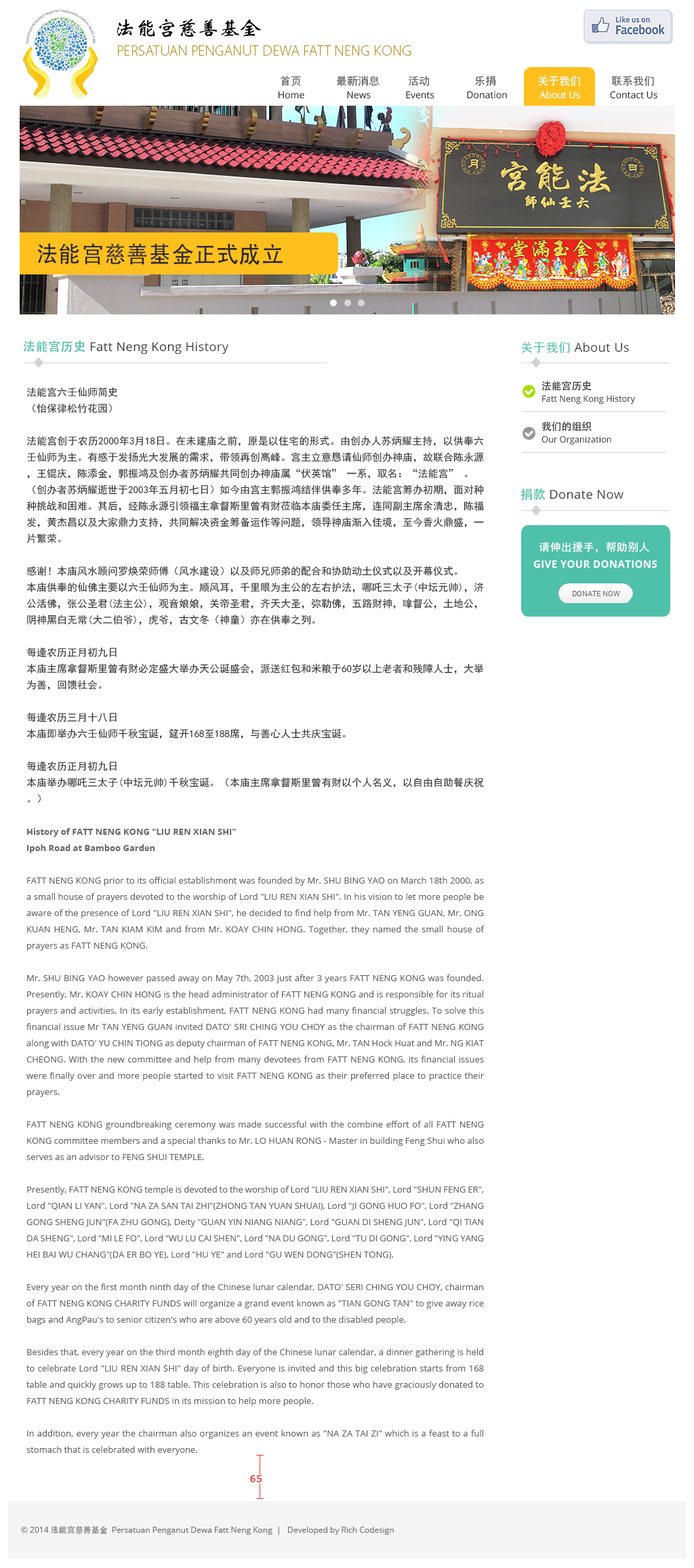
<style>
.page{position:relative;width:694px;height:1568px;background:#ffffff}
.page>*{position:absolute;margin:0}
.t1{font:20.9px "WeibeiCSEG??NÑ²ó??";letter-spacing:-0.05em;color:#000000;text-transform:uppercase;scale:1.04 1}
.t2{font:14.9px "Vegur-Light";color:#b38701;text-transform:uppercase;scale:1.03 1}
.t3{font:10.8px "SimHei";color:#5a5a5a}
.t4{font:10.8px "SimHei";color:#ffffff}
.t5{font:9.5px "OpenSans";color:#303030}
.t6{font:9.5px "OpenSans";color:#ffffff}
.t7{font:23.1px "MS-Hei";color:#292929}
.t8{font:12.2px "OpenSans";letter-spacing:0.025em;color:#343434}
.t9{font:12.2px "AdobeHeitiStd-Regular";letter-spacing:0.025em;color:#4fc0aa}
.t10{font:12.2px "OpenSans";letter-spacing:0.025em;color:#474747}
.t11{font:12.2px "SimHei";letter-spacing:0.025em;color:#4fc0aa}
.t12{font:8.8px/16.3px "OpenSans";color:#666666}
.t13{font:10.2px/16.3px "SimHei";color:#353535}
.t14{font:8.8px/16.3px "OpenSans-Bold";color:#666666}
.t15{font:10.2px/40.7px "AdobeHeitiStd-Regular";color:#474747}
.t16{font:8.8px/40.7px "OpenSans";color:#474747}
.t17{font:10.8px "SimHei";letter-spacing:0.025em;color:#ffffff}
.t18{font:10.2px "OpenSans-Bold";letter-spacing:0.025em;color:#ffffff}
.t19{font:9.5px "Verdana";color:#f83030;font-weight:bold}
.t20{font:8.1px "OpenSans";color:#737373}
.t21{font:8.1px "MS-Hei";color:#737373}
</style>
<div class="page">
<p class="t1" style="left:117px;top:18px;width:144px;height:19px">法能宫慈善基金</p>
<p class="t2" style="left:118px;top:45px;width:293px;height:11px">PERSATUAN PENGANUT DEWA fatt neng kong</p>
<p class="t3" style="left:280px;top:75px;width:21px;height:11px">首页</p>
<p class="t3" style="left:336px;top:75px;width:43px;height:11px">最新消息</p>
<p class="t3" style="left:409px;top:76px;width:21px;height:10px">活动</p>
<p class="t3" style="left:475px;top:75px;width:21px;height:11px">乐捐</p>
<p class="t4" style="left:538px;top:75px;width:42px;height:11px">关于我们</p>
<p class="t3" style="left:611px;top:75px;width:43px;height:11px">联系我们</p>
<p class="t5" style="left:278px;top:91px;width:379px;height:8px">Home                 News              Events             Donation             <span class="t6">About Us </span>           Contact Us</p>
<p class="t7" style="left:37px;top:243px;width:246px;height:22px">法能宫慈善基金正式成立</p>
<p class="t8" style="left:24px;top:340px;width:204px;height:14px"><span class="t9">法能宫历史</span> Fatt Neng Kong <span class="t10">History</span></p>
<p class="t10" style="left:521px;top:342px;width:108px;height:12px"><span class="t11">关于我们 </span>About Us</p>
<p class="t12" style="left:26px;top:387px;width:458px;height:1068px;text-align:justify"><span class="t13">法能宫六壬仙师简史<br>（怡保律松竹花园）<br><br>法能宫创于农历2000年3月18日。在未建庙之前，原是以住宅的形式。由创办人苏炳耀主持，以供奉六壬仙师为主。有感于发扬光大发展的需求，带领再创高峰。宫主立意恳请仙师创办神庙，故联合陈永源，王锟庆，陈添金，郭振鸿及创办者苏炳耀共同创办神庙属“伏英馆” 一系，取名：“法能宫” 。<br>（创办者苏炳耀逝世于2003年五月初七日）如今由宫主郭振鸿结伴供奉多年。法能宫筹办初期，面对种种挑战和困难。其后，经陈永源引领福主拿督斯里曾有财莅临本庙委任主席，连同副主席余清忠，陈福发，黄杰昌以及大家鼎力支持，共同解决资金筹备运作等问题，领导神庙渐入佳境，至今香火鼎盛，一片繁荣。<br><br>感谢！本庙风水顾问罗焕荣师傅（风水建设）以及师兄师弟的配合和协助动土仪式以及开幕仪式。<br>本庙供奉的仙佛主要以六壬仙师为主。顺风耳，千里眼为主公的左右护法，哪吒三太子(中坛元帅)，济公活佛，张公圣君(法主公)，观音娘娘，关帝圣君，齐天大圣，弥勒佛，五路财神，嗱督公，土地公，阴神黑白无常(大二伯爷)，虎爷，古文冬（神童）亦在供奉之列。<br><br>每逢农历正月初九日<br>本庙主席拿督斯里曾有财必定盛大举办天公诞盛会，派送红包和米粮于60岁以上老者和残障人士，大举为善，回馈社会。<br><br>每逢农历三月十八日<br>本庙即举办六壬仙师千秋宝诞，筵开168至188席，与善心人士共庆宝诞。<br><br>每逢农历正月初九日<br>本庙举办哪吒三太子(中坛元帅)千秋宝诞。（本庙主席拿督斯里曾有财以个人名义，以自由自助餐庆祝。）<br></span><span class="t14"><br>History of FATT NENG KONG "LIU REN XIAN SHI"<br>Ipoh Road at Bamboo Garden<br><br></span>FATT NENG KONG prior to its official establishment was founded by Mr. SHU BING YAO on March 18th 2000, as a small house of prayers devoted to the worship of Lord "LIU REN XIAN SHI". In his vision to let more people be aware of the presence of Lord "LIU REN XIAN SHI", he decided to find help from Mr. TAN YENG GUAN, Mr. ONG KUAN HENG, Mr. TAN KIAM KIM and from Mr. KOAY CHIN HONG. Together, they named the small house of prayers as FATT NENG KONG.<br><br>Mr. SHU BING YAO however passed away on May 7th, 2003 just after 3 years FATT NENG KONG was founded. Presently, Mr. KOAY CHIN HONG is the head administrator of FATT NENG KONG and is responsible for its ritual prayers and activities. In its early establishment, FATT NENG KONG had many financial struggles. To solve this financial issue Mr TAN YENG GUAN invited DATO' SRI CHING YOU CHOY as the chairman of FATT NENG KONG along with DATO' YU CHIN TIONG as deputy chairman of FATT NENG KONG, Mr. TAN Hock Huat and Mr. NG KIAT CHEONG. With the new committee and help from many devotees from FATT NENG KONG, its financial issues were finally over and more people started to visit FATT NENG KONG as their preferred place to practice their prayers.<br><br>FATT NENG KONG groundbreaking ceremony was made successful with the combine effort of all FATT NENG KONG committee members and a special thanks to Mr. LO HUAN RONG - Master in building Feng Shui who also serves as an advisor to FENG SHUI TEMPLE.<br><br>Presently, FATT NENG KONG temple is devoted to the worship of Lord "LIU REN XIAN SHI", Lord "SHUN FENG ER", Lord "QIAN LI YAN", Lord "NA ZA SAN TAI ZHI"(ZHONG TAN YUAN SHUAI), Lord "JI GONG HUO FO", Lord "ZHANG GONG SHENG JUN"(FA ZHU GONG), Deity "GUAN YIN NIANG NIANG", Lord "GUAN DI SHENG JUN", Lord "QI TIAN DA SHENG", Lord "MI LE FO", Lord "WU LU CAI SHEN", Lord "NA DU GONG", Lord "TU DI GONG", Lord "YING YANG HEI BAI WU CHANG"(DA ER BO YE), Lord "HU YE" and Lord "GU WEN DONG"(SHEN TONG).<br><br>Every year on the first month ninth day of the Chinese lunar calendar, DATO' SERI CHING YOU CHOY, chairman of FATT NENG KONG CHARITY FUNDS will organize a grand event known as "TIAN GONG TAN" to give away rice bags and AngPau's to senior citizen's who are above 60 years old and to the disabled people.<br><br>Besides that, every year on the third month eighth day of the Chinese lunar calendar, a dinner gathering is held to celebrate Lord "LIU REN XIAN SHI" day of birth. Everyone is invited and this big celebration starts from 168 table and quickly grows up to 188 table. This celebration is also to honor those who have graciously donated to FATT NENG KONG CHARITY FUNDS in its mission to help more people.<br><br>In addition, every year the chairman also organizes an event known as "NA ZA TAI ZI" which is a feast to a full stomach that is celebrated with everyone.</p>
<p class="t15" style="left:541px;top:381px;width:51px;height:51px">法能宫历史<br>我们的组织</p>
<p class="t16" style="left:541px;top:395px;width:94px;height:50px">Fatt Neng Kong History<br>Our Organization</p>
<p class="t8" style="left:520px;top:488px;width:103px;height:12px"><span class="t9">捐款</span> Donate <span class="t10">Now</span></p>
<p class="t17" style="left:539px;top:541px;width:110px;height:12px">请伸出援手，帮助别人</p>
<p class="t18" style="left:533px;top:560px;width:124px;height:8px">GIVE YOUR DONATIONS</p>
<p class="t19" style="left:250px;top:1475px;width:12px;height:8px">65</p>
<p class="t20" style="left:21px;top:1526px;width:373px;height:9px">© 2014 <span class="t21">法能宫慈善基金 </span>Persatuan Penganut Dewa Fatt Neng Kong  |   Developed by Rich Codesign</p>
</div>
